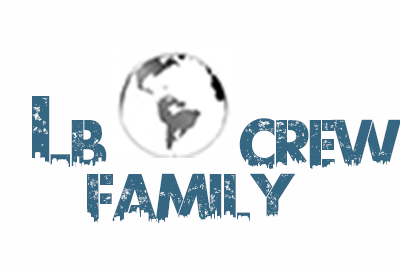
<style>
.page{position:relative;width:400px;height:267px;background:#fffefe}
.page>*{position:absolute;margin:0}
.t1{font:96.1px "UrbanJungleDEMO";color:#356782}
.t2{font:64.1px "UrbanJungleDEMO";color:#356782}
</style>
<div class="page">
<p class="t1" style="left:32px;top:96px;width:75px;height:73px">L<span class="t2">b</span></p>
<p class="t2" style="left:239px;top:118px;width:162px;height:51px">Crew</p>
<p class="t2" style="left:87px;top:173px;width:208px;height:51px">FAMILY</p>
</div>
